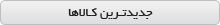
<style>
.page{position:relative;width:220px;height:25px}
.page>*{position:absolute;margin:0}
.t1{font:13.2px "BYekan";color:#231f20}
</style>
<div class="page">
<p class="t1" style="left:68px;top:8px;width:85px;height:11px">جدیدتـرین کـالاها</p>
</div>
